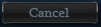
<style>
.page{position:relative;width:101px;height:27px}
.page>*{position:absolute;margin:0}
.t1{font:14px "Sylfaen";color:#6d6969}
</style>
<div class="page">
<p class="t1" style="left:29px;top:8px;width:40px;height:9px">Cancel</p>
</div>
